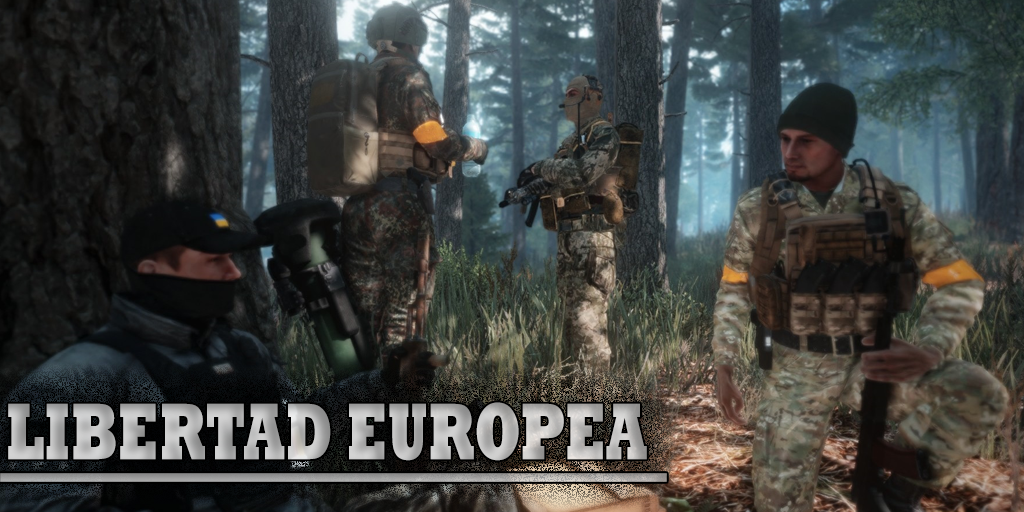
<style>
.page{position:relative;width:1024px;height:512px}
.page>*{position:absolute;margin:0}
.t1{font:81.7px "Rockwell-ExtraBold";scale:0.67 1}
</style>
<div class="page">
<p class="t1" style="left:8px;top:402px;width:639px;height:59px">LIBERTAD EUROPEA</p>
</div>
